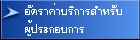
<style>
.page{position:relative;width:140px;height:40px}
.page>*{position:absolute;margin:0}
.t1{font:15.3px/18px "EucrosiaDSE";color:#ffffff;scale:1.12 1}
</style>
<div class="page">
<p class="t1" style="left:25px;top:3px;width:97px;height:33px">ÍÑµÃÒ¤èÒºÃÔ¡ÒÃÊÓËÃÑº<br>¼Ùé»ÃÐ¡Íº¡ÒÃ</p>
</div>
